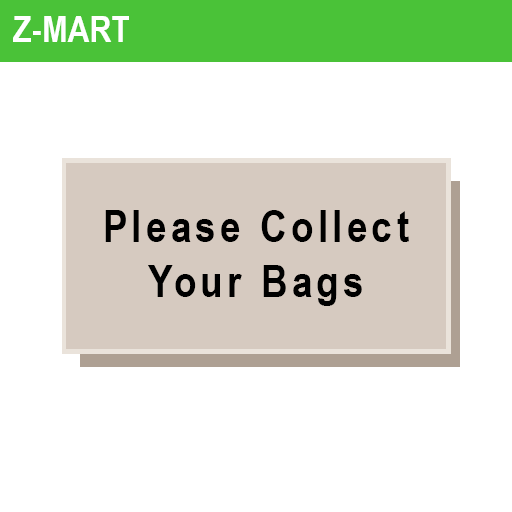
<style>
.page{position:relative;width:512px;height:512px;background:#ffffff}
.page>*{position:absolute;margin:0}
.t1{font:45.3px "ArialNarrow-Bold";letter-spacing:0.1em;color:#000000}
</style>
<div class="page">
<p class="t1" style="left:105px;top:210px;width:304px;height:96px;text-align:center">Please Collect <br>Your Bags</p>
</div>
